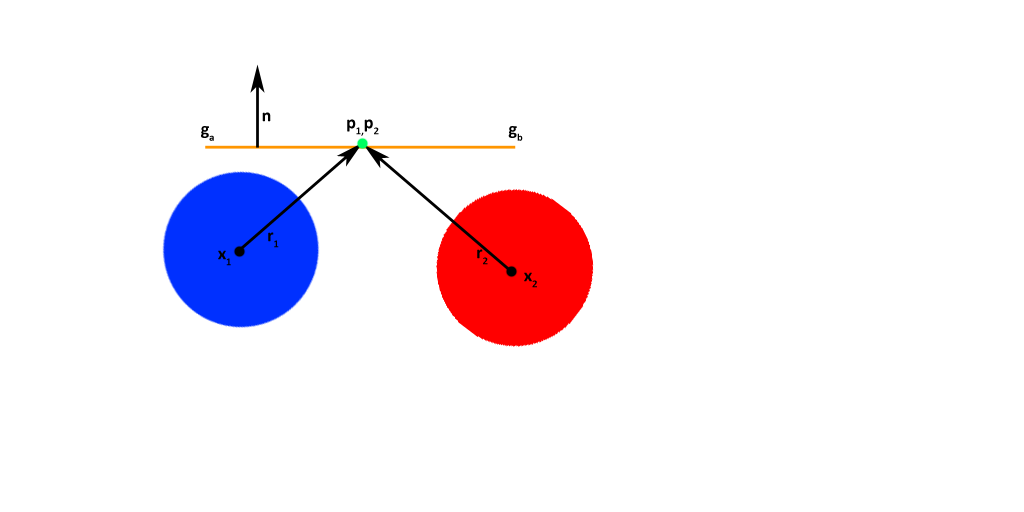
<style>
.page{position:relative;width:1024px;height:512px;background:#ffffff}
.page>*{position:absolute;margin:0}
.t1{font:18px "Calibri-Bold";color:#000000}
</style>
<div class="page">
<p class="t1" style="left:262px;top:112px;width:9px;height:10px">n</p>
<p class="t1" style="left:201px;top:126px;width:13px;height:15px">ga</p>
<p class="t1" style="left:347px;top:119px;width:32px;height:17px">p1,p2</p>
<p class="t1" style="left:508px;top:126px;width:15px;height:15px">gb</p>
<p class="t1" style="left:268px;top:232px;width:11px;height:16px">r1</p>
<p class="t1" style="left:218px;top:250px;width:13px;height:16px">x1</p>
<p class="t1" style="left:477px;top:249px;width:11px;height:16px">r2</p>
<p class="t1" style="left:524px;top:272px;width:13px;height:16px">x2</p>
</div>
